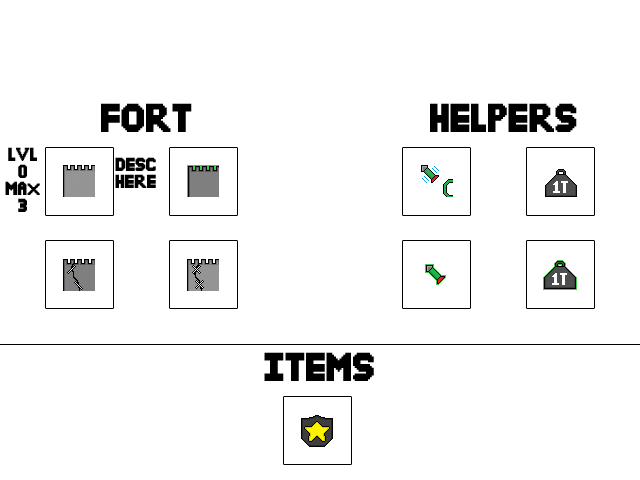
<style>
.page{position:relative;width:640px;height:480px;background:#ffffff}
.page>*{position:absolute;margin:0}
.t1{font:30px "DefendYourFortFilled";color:#000000}
.t2{font:14px "DefendYourFortFilled";color:#000000}
</style>
<div class="page">
<p class="t1" style="left:101px;top:103px;width:91px;height:29px">Fort</p>
<p class="t1" style="left:430px;top:103px;width:147px;height:29px">Helpers</p>
<p class="t2" style="left:5px;top:147px;width:35px;height:65px;text-align:center">Lvl<br>0<br>Max<br>3</p>
<p class="t2" style="left:115px;top:157px;width:41px;height:31px;text-align:center">Desc HERE</p>
<p class="t1" style="left:264px;top:352px;width:110px;height:29px">ITEMS</p>
</div>
